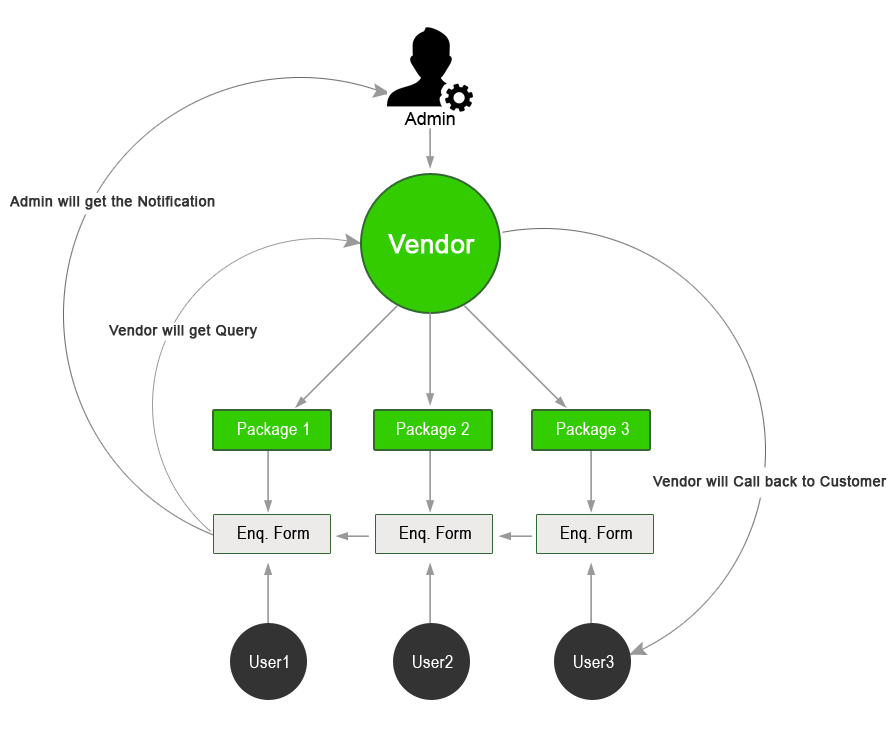
<style>
.page{position:relative;width:896px;height:735px;background:#ffffff}
.page>*{position:absolute;margin:0}
.t1{font:18px "ArialMT";color:#000000}
.t2{font:14px "ArialMT";letter-spacing:0.025em;color:#333333;font-weight:bold}
.t3{font:26px "ArialMT";color:#ffffff;font-weight:bold}
.t4{font:18px "ArialNarrow";letter-spacing:0.025em;color:#ffffff}
.t5{font:18px "ArialNarrow";letter-spacing:0.025em;color:#000000}
</style>
<div class="page">
<p class="t1" style="left:404px;top:112px;width:51px;height:13px">Admin</p>
<p class="t2" style="left:10px;top:195px;width:205px;height:15px">Admin will get the Notification</p>
<p class="t3" style="left:388px;top:234px;width:87px;height:20px">Vendor</p>
<p class="t2" style="left:109px;top:324px;width:148px;height:15px">Vendor will get Query</p>
<p class="t4" style="left:238px;top:422px;width:70px;height:17px">Package 1</p>
<p class="t4" style="left:397px;top:422px;width:72px;height:17px">Package 2</p>
<p class="t4" style="left:557px;top:422px;width:72px;height:17px">Package 3</p>
<p class="t2" style="left:653px;top:475px;width:234px;height:12px">Vendor will Call back to Customer</p>
<p class="t5" style="left:238px;top:526px;width:71px;height:17px">Enq. Form</p>
<p class="t5" style="left:400px;top:526px;width:71px;height:17px">Enq. Form</p>
<p class="t5" style="left:561px;top:526px;width:71px;height:17px">Enq. Form</p>
<p class="t4" style="left:250px;top:655px;width:38px;height:13px">User1</p>
<p class="t4" style="left:413px;top:655px;width:40px;height:13px">User2</p>
<p class="t4" style="left:574px;top:655px;width:40px;height:13px">User3</p>
</div>
